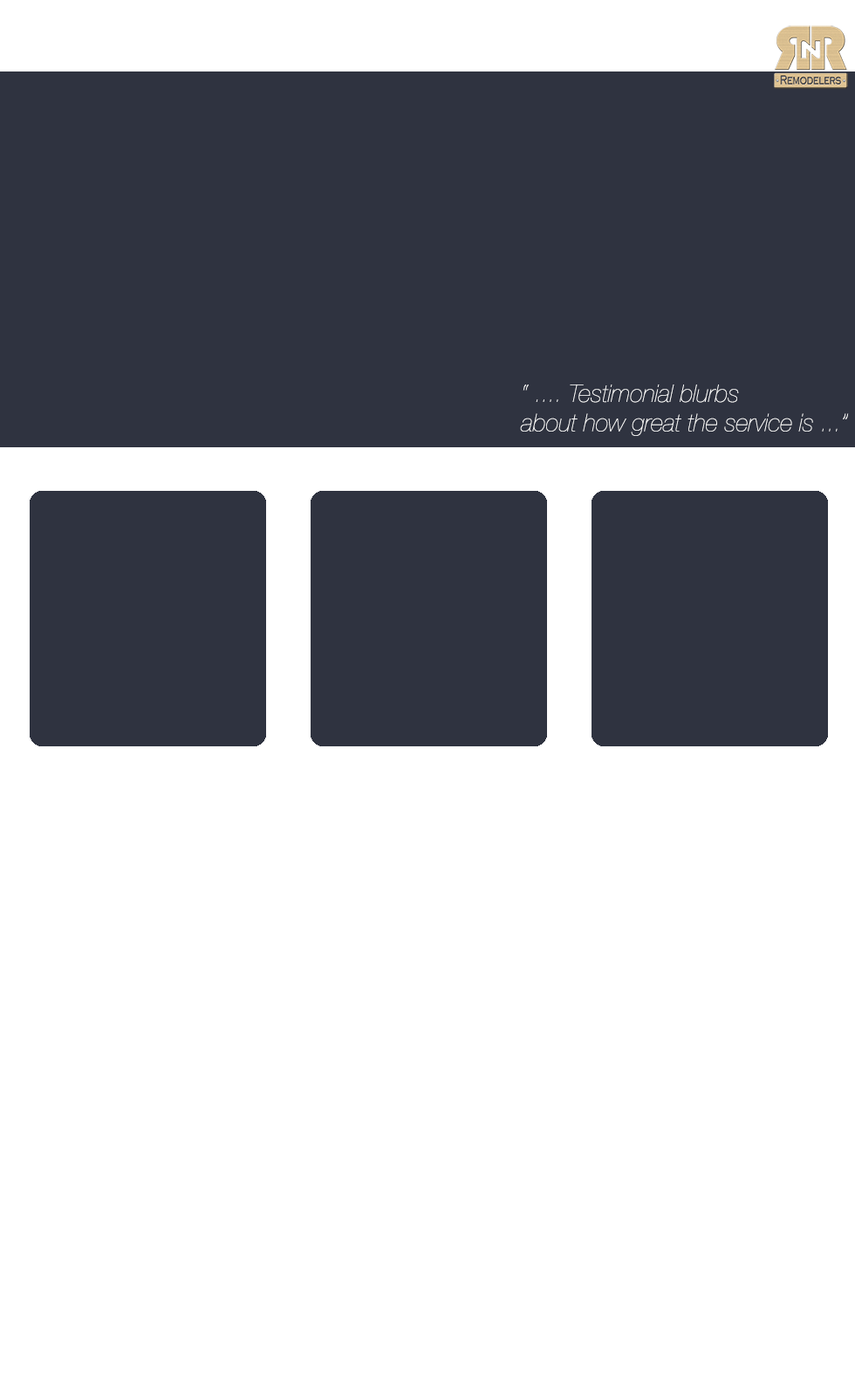
<style>
.page{position:relative;width:855px;height:1395px;background:#ffffff}
.page>*{position:absolute;margin:0}
.t1{font:24.4px "HelveticaNeueLTStd-UltLtIt";color:#ffffff}
</style>
<div class="page">
<p class="t1" style="left:520px;top:385px;width:329px;height:51px">“ .... Testimonial blurbs<br>about how great the service is ...”</p>
</div>
